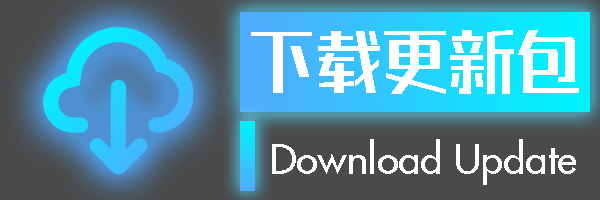
<style>
.page{position:relative;width:600px;height:200px;background:#4a4a4a}
.page>*{position:absolute;margin:0}
.t1{font:66.7px "REEJIZhenyanGB20GX-Medium";color:#ffffff}
.t2{font:40px "Futura-Medium";color:#ffffff}
</style>
<div class="page">
<p class="t1" style="left:251px;top:30px;width:328px;height:64px">下载更新包</p>
<p class="t2" style="left:272px;top:139px;width:304px;height:46px">Download Update</p>
</div>
